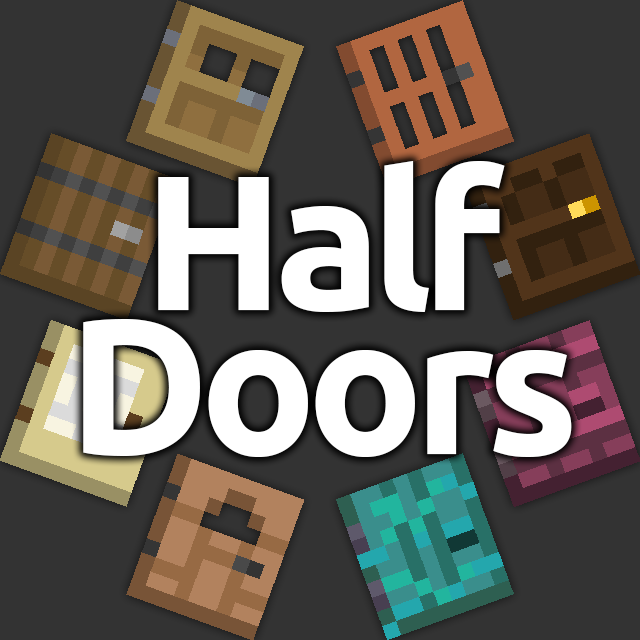
<style>
.page{position:relative;width:640px;height:640px;background:#333333}
.page>*{position:absolute;margin:0}
.t1{font:192px/144px "Ubuntu-Bold";letter-spacing:-0.05em;color:#ffffff}
</style>
<div class="page">
<p class="t1" style="left:83px;top:161px;width:489px;height:296px;text-align:center">Half<br>Doors</p>
</div>
